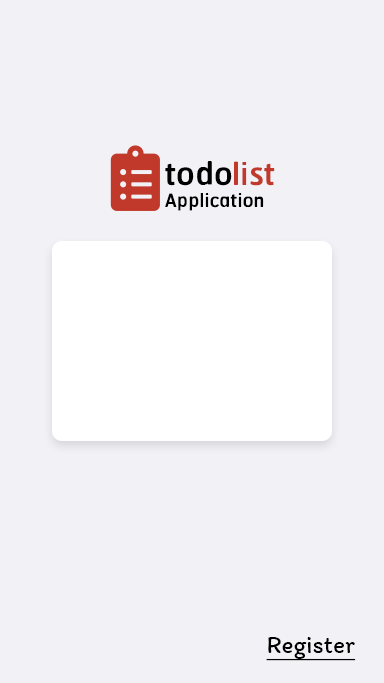
<style>
.page{position:relative;width:384px;height:683px;background:#f2f1f6}
.page>*{position:absolute;margin:0}
.t1{font:41.7px "RSU-Bold";color:#000000}
.t2{font:41.7px "RSU-Bold";color:#c0392b}
.t3{font:25px "RSU-Bold";color:#000000}
.t4{font:25px "Itim-Regular";color:#000000;text-decoration:underline}
</style>
<div class="page">
<p class="t1" style="left:165px;top:161px;width:110px;height:25px">todo<span class="t2">list</span></p>
<p class="t3" style="left:165px;top:193px;width:99px;height:18px">Application</p>
<p class="t4" style="left:266px;top:637px;width:90px;height:24px">Register</p>
</div>
